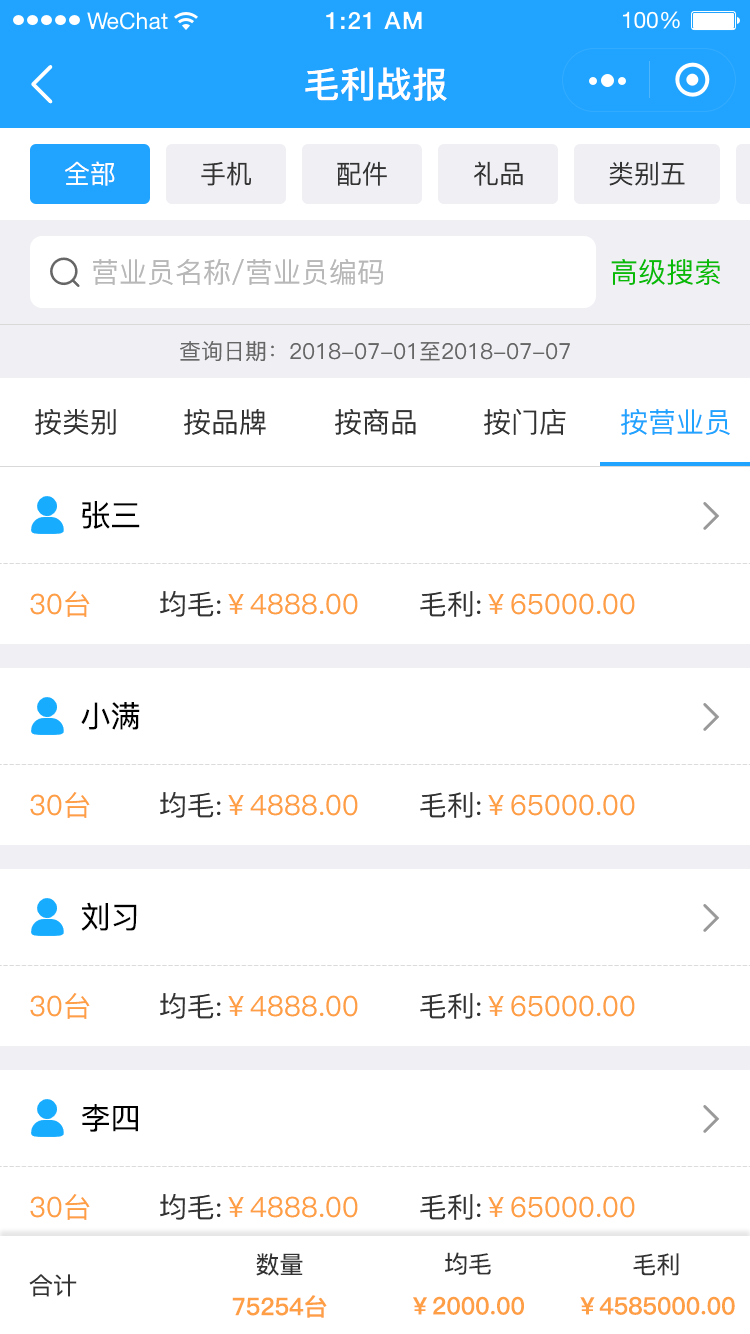
<style>
.page{position:relative;width:750px;height:1334px;background:#ffffff}
.page>*{position:absolute;margin:0}
.t1{font:36px "PingFang-SC-Bold";color:#ffffff}
.t2{font:26px "PingFang-SC-Medium";color:#ffffff}
.t3{font:26px "PingFang-SC-Medium";color:#333333}
.t4{font:28px "PingFang-SC-Medium";color:#b8b8b8}
.t5{font:28px "PingFang-SC-Medium";color:#09bb07}
.t6{font:22px "PingFang-SC-Medium";color:#666666}
.t7{font:28px "PingFang-SC-Medium";color:#333333}
.t8{font:28px "PingFang-SC-Medium";color:#21a4ff}
.t9{font:30px "PingFang-SC-Medium";color:#000000}
.t10{font:28px "PingFang-SC-Medium";color:#fe9f45}
.t11{font:24px "PingFang-SC-Medium";color:#333333}
.t12{font:24px "PingFang-SC-Bold";color:#fe9f45}
</style>
<div class="page">
<p class="t1" style="left:305px;top:67px;width:142px;height:34px">毛利战报</p>
<p class="t2" style="left:65px;top:161px;width:50px;height:25px">全部</p>
<p class="t3" style="left:201px;top:161px;width:50px;height:25px">手机</p>
<p class="t3" style="left:337px;top:161px;width:50px;height:25px">配件</p>
<p class="t3" style="left:474px;top:161px;width:49px;height:25px">礼品</p>
<p class="t3" style="left:609px;top:161px;width:76px;height:25px">类别五</p>
<p class="t4" style="left:93px;top:259px;width:290px;height:26px">营业员名称/营业员编码</p>
<p class="t5" style="left:611px;top:259px;width:109px;height:26px">高级搜索</p>
<p class="t6" style="left:180px;top:341px;width:390px;height:21px">查询日期：2018-07-01至2018-07-07</p>
<p class="t7" style="left:35px;top:409px;width:81px;height:26px">按类别</p>
<p class="t7" style="left:184px;top:409px;width:82px;height:26px">按品牌</p>
<p class="t7" style="left:335px;top:409px;width:81px;height:26px">按商品</p>
<p class="t7" style="left:484px;top:409px;width:82px;height:26px">按门店</p>
<p class="t8" style="left:621px;top:409px;width:109px;height:26px">按营业员</p>
<p class="t9" style="left:82px;top:501px;width:58px;height:28px">张三</p>
<p class="t10" style="left:30px;top:591px;width:60px;height:26px">30台</p>
<p class="t10" style="left:160px;top:591px;width:198px;height:26px"><span class="t7">均毛:</span>￥4888.00</p>
<p class="t10" style="left:420px;top:591px;width:215px;height:26px"><span class="t7">毛利:</span>￥65000.00</p>
<p class="t9" style="left:81px;top:702px;width:59px;height:28px">小满</p>
<p class="t10" style="left:30px;top:792px;width:60px;height:26px">30台</p>
<p class="t10" style="left:160px;top:792px;width:198px;height:26px"><span class="t7">均毛:</span>￥4888.00</p>
<p class="t10" style="left:420px;top:792px;width:215px;height:26px"><span class="t7">毛利:</span>￥65000.00</p>
<p class="t9" style="left:81px;top:902px;width:56px;height:29px">刘习</p>
<p class="t10" style="left:30px;top:993px;width:60px;height:26px">30台</p>
<p class="t10" style="left:160px;top:993px;width:198px;height:26px"><span class="t7">均毛:</span>￥4888.00</p>
<p class="t10" style="left:420px;top:993px;width:215px;height:26px"><span class="t7">毛利:</span>￥65000.00</p>
<p class="t9" style="left:82px;top:1104px;width:56px;height:28px">李四</p>
<p class="t10" style="left:30px;top:1194px;width:60px;height:26px">30台</p>
<p class="t10" style="left:160px;top:1194px;width:198px;height:26px"><span class="t7">均毛:</span>￥4888.00</p>
<p class="t10" style="left:420px;top:1194px;width:215px;height:26px"><span class="t7">毛利:</span>￥65000.00</p>
<p class="t11" style="left:256px;top:1253px;width:47px;height:23px">数量</p>
<p class="t11" style="left:445px;top:1252px;width:46px;height:23px">均毛</p>
<p class="t11" style="left:633px;top:1253px;width:46px;height:23px">毛利</p>
<p class="t11" style="left:29px;top:1274px;width:48px;height:23px">合计</p>
<p class="t12" style="left:232px;top:1295px;width:95px;height:23px">75254台</p>
<p class="t12" style="left:413px;top:1296px;width:111px;height:19px">￥2000.00</p>
<p class="t12" style="left:580px;top:1296px;width:155px;height:19px">￥4585000.00</p>
</div>
